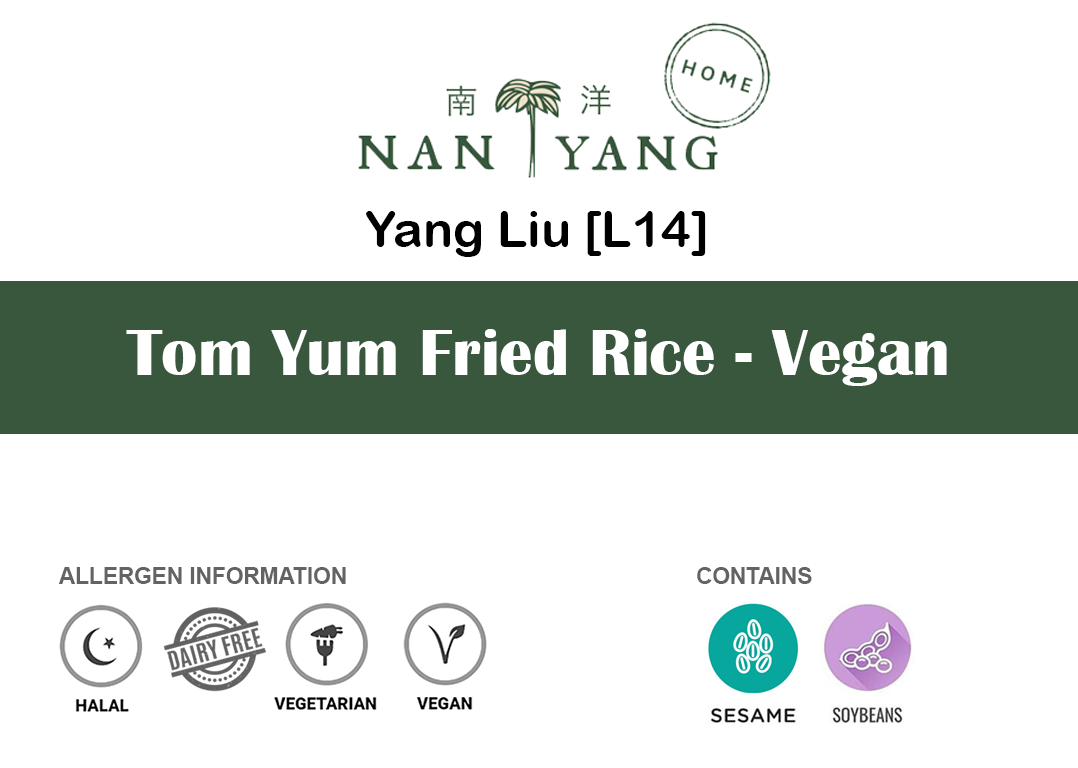
<style>
.page{position:relative;width:1078px;height:768px;background:#ffffff}
.page>*{position:absolute;margin:0}
.t1{font:50px "ArialRoundedMTBold";color:#000000}
.t2{font:66.7px "BritannicBold";color:#ffffff}
.t3{font:22.6px "Arial-BoldMT";color:#636363}
</style>
<div class="page">
<p class="t1" style="left:366px;top:211px;width:340px;height:46px">Yang Liu [L14]</p>
<p class="t2" style="left:126px;top:329px;width:821px;height:57px">Tom Yum Fried Rice - Vegan</p>
<p class="t3" style="left:58px;top:567px;width:288px;height:17px">ALLERGEN INFORMATION</p>
<p class="t3" style="left:697px;top:567px;width:115px;height:17px">CONTAINS</p>
</div>
